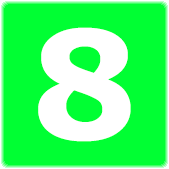
<style>
.page{position:relative;width:169px;height:169px;background:#00ff33}
.page>*{position:absolute;margin:0}
.t1{font:150px "Verdana-Bold";color:#ffffff;text-transform:uppercase}
</style>
<div class="page">
<p class="t1" style="left:38px;top:27px;width:93px;height:115px">8</p>
</div>
